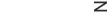
<style>
.page{position:relative;width:110px;height:14px;background:#ffffff}
.page>*{position:absolute;margin:0}
.t1{font:18px "ArialMT";color:#303030}
</style>
<div class="page">
<p class="t1" style="left:94px;top:1px;width:13px;height:11px;rotate:90deg">N</p>
</div>
